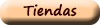
<style>
.page{position:relative;width:100px;height:25px}
.page>*{position:absolute;margin:0}
.t1{font:14px "SegoePrint-Bold";color:#330000}
</style>
<div class="page">
<p class="t1" style="left:23px;top:4px;width:54px;height:13px">Tiendas</p>
</div>
